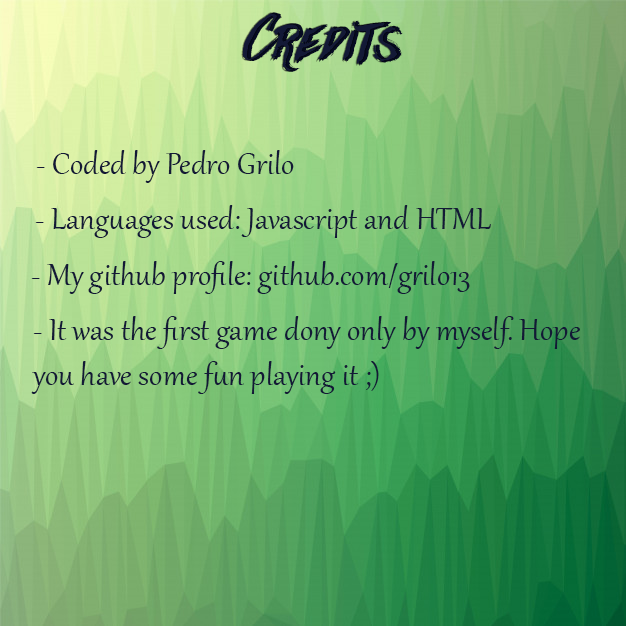
<style>
.page{position:relative;width:626px;height:626px}
.page>*{position:absolute;margin:0}
.t1{font:66.7px "Againts";color:#131936}
.t2{font:66.7px "Againts";color:#060b23}
.t3{font:37.3px "Gabriola";color:#131936}
</style>
<div class="page">
<p class="t1" style="left:241px;top:12px;width:159px;height:60px">Credits</p>
<p class="t2" style="left:244px;top:12px;width:159px;height:60px">Credits</p>
<p class="t3" style="left:36px;top:150px;width:258px;height:33px">- Coded by Pedro Grilo</p>
<p class="t3" style="left:35px;top:205px;width:456px;height:33px">- Languages used: Javascript and HTML</p>
<p class="t3" style="left:31px;top:261px;width:439px;height:33px">- My github profile: github.com/grilo13</p>
<p class="t3" style="left:31px;top:316px;width:549px;height:78px">- It was the first game dony only by myself. Hope<br>you have some fun playing it ;)</p>
</div>
